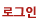
<style>
.page{position:relative;width:38px;height:23px;background:#ffffff}
.page>*{position:absolute;margin:0}
.t1{font:12px "NanumGothicBold";color:#ae1c17;font-weight:bold}
</style>
<div class="page">
<p class="t1" style="left:2px;top:6px;width:34px;height:12px">로그인</p>
</div>
